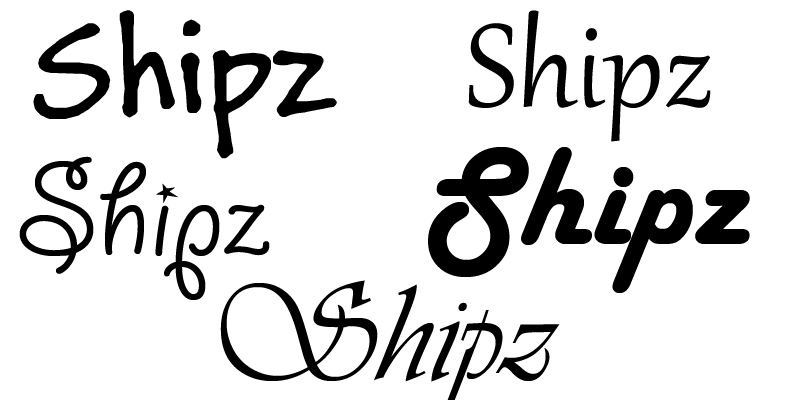
<style>
.page{position:relative;width:800px;height:400px;background:#ffffff}
.page>*{position:absolute;margin:0}
.t1{font:144px "BuxtonSketch";color:#000000}
.t2{font:144px "Gabriola";color:#000000}
.t3{font:144px "HarlowSolid";color:#000000}
.t4{font:144px "GiddyupStd";color:#000000}
</style>
<div class="page">
<p class="t1" style="left:33px;top:10px;width:304px;height:149px">Shipz</p>
<p class="t2" style="left:468px;top:10px;width:243px;height:132px">Shipz</p>
<p class="t3" style="left:428px;top:147px;width:322px;height:146px"><span class="t1"> </span>Shipz</p>
<p class="t4" style="left:19px;top:156px;width:251px;height:144px">Shipz</p>
</div>
